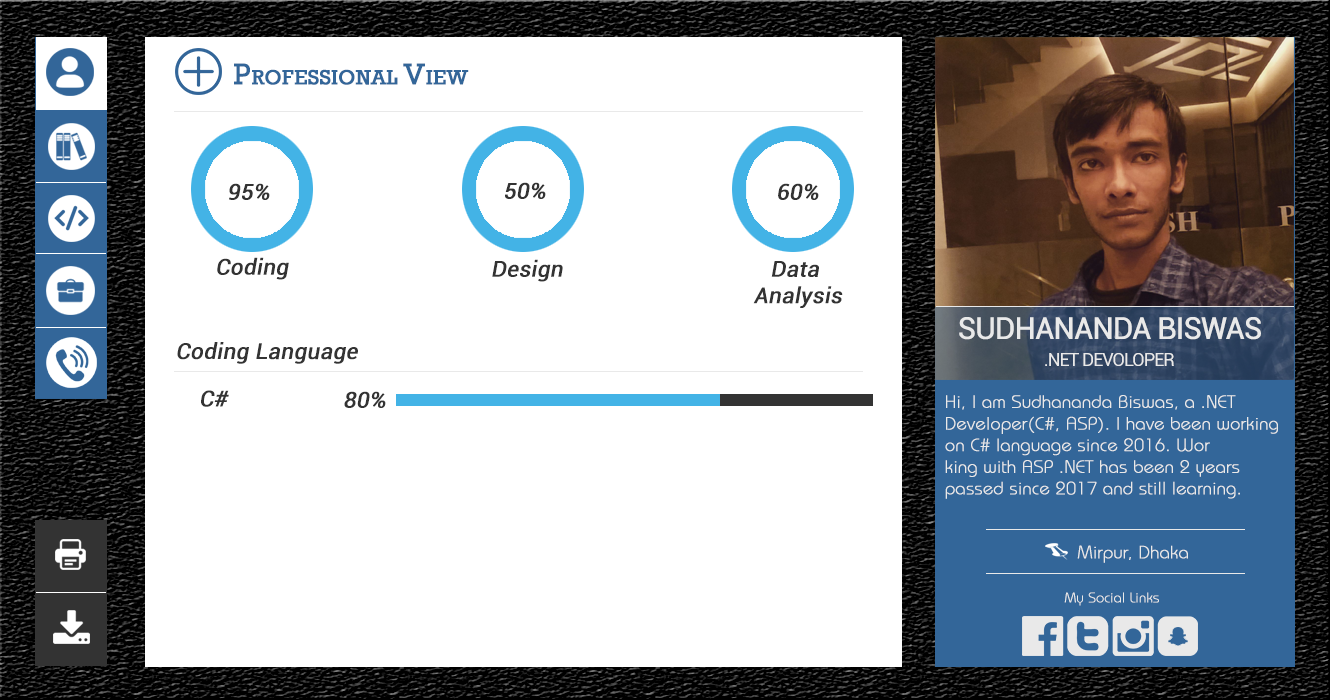
<style>
.page{position:relative;width:1330px;height:700px;background:#ffffff}
.page>*{position:absolute;margin:0}
.t1{font:30px "Rockwell";color:#336699;font-variant:small-caps;font-weight:bold}
.t2{font:22px "Roboto-Regular";color:#333333;font-weight:bold;font-style:italic}
.t3{font:30px "Roboto-Regular";letter-spacing:-0.05em;color:#e9e9e9;text-transform:uppercase;font-weight:bold}
.t4{font:18px "Roboto-Regular";letter-spacing:-0.05em;color:#e9e9e9;text-transform:uppercase}
.t5{font:18px "BahamasLightPlain";color:#e9e9e9;font-weight:bold}
.t6{font:14px "BahamasLightPlain";color:#e9e9e9;font-weight:bold}
</style>
<div class="page">
<p class="t1" style="left:234px;top:63px;width:235px;height:22px">Professional View</p>
<p class="t2" style="left:229px;top:183px;width:41px;height:17px">95%</p>
<p class="t2" style="left:505px;top:182px;width:41px;height:17px">50%</p>
<p class="t2" style="left:778px;top:183px;width:41px;height:17px">60%</p>
<p class="t2" style="left:217px;top:257px;width:72px;height:23px">Coding</p>
<p class="t2" style="left:492px;top:259px;width:71px;height:23px">Design</p>
<p class="t2" style="left:753px;top:261px;width:90px;height:47px;text-align:center">Data <br>Analysis</p>
<p class="t3" style="left:959px;top:317px;width:302px;height:23px">Sudhananda Biswas</p>
<p class="t2" style="left:177px;top:342px;width:181px;height:22px">Coding Language</p>
<p class="t4" style="left:1045px;top:353px;width:129px;height:13px">.Net Devoloper</p>
<p class="t2" style="left:201px;top:390px;width:28px;height:17px">C#</p>
<p class="t2" style="left:344px;top:391px;width:42px;height:17px">80%</p>
<p class="t5" style="left:945px;top:395px;width:333px;height:104px">Hi, I am Sudhananda Biswas, a .NET Developer(C#, ASP). I have been working on C# language since 2016. Wor<br>king with ASP .NET has been 2 years passed since 2017 and still learning.</p>
<p class="t5" style="left:1077px;top:545px;width:111px;height:18px">Mirpur, Dhaka</p>
<p class="t6" style="left:1064px;top:592px;width:95px;height:14px">My Social Links</p>
</div>
